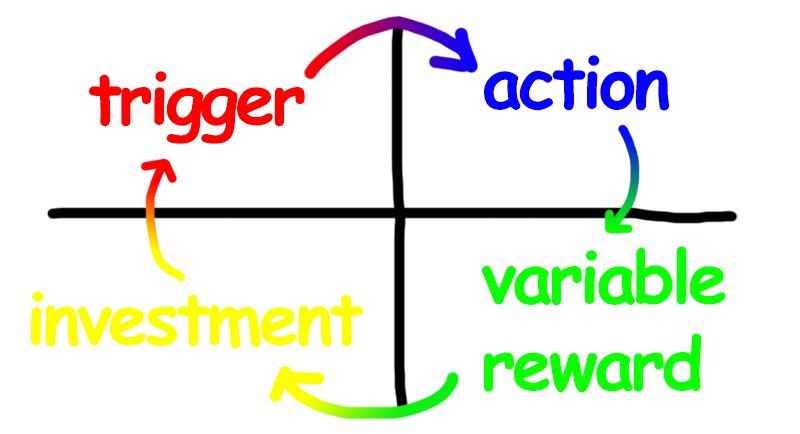
<style>
.page{position:relative;width:800px;height:434px;background:#ffffff}
.page>*{position:absolute;margin:0}
.t1{font:72px "ComicSansMS-Bold";letter-spacing:-0.05em;color:#0600ff}
.t2{font:72px "ComicSansMS-Bold";letter-spacing:-0.05em;color:#ff0000}
.t3{font:72px "ComicSansMS-Bold";letter-spacing:-0.05em;color:#0cff00}
.t4{font:72px "ComicSansMS-Bold";letter-spacing:-0.05em;color:#fcff00}
</style>
<div class="page">
<p class="t1" style="left:484px;top:55px;width:185px;height:56px">action</p>
<p class="t2" style="left:89px;top:71px;width:216px;height:73px">trigger</p>
<p class="t3" style="left:481px;top:246px;width:245px;height:147px">variable<br>reward</p>
<p class="t4" style="left:31px;top:291px;width:332px;height:58px">investment</p>
</div>
